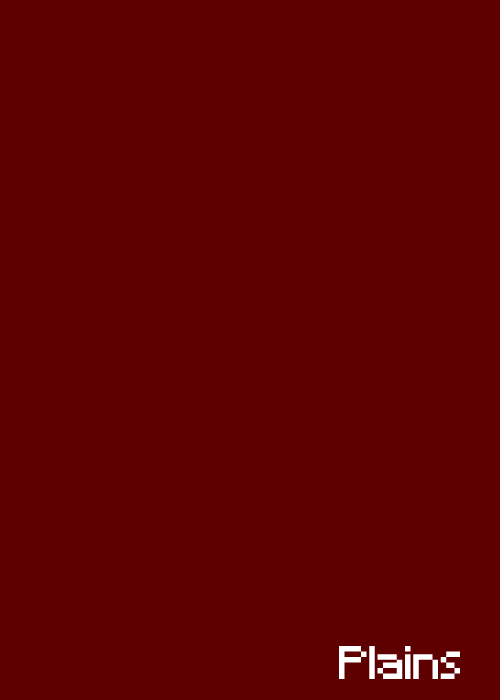
<style>
.page{position:relative;width:500px;height:700px;background:#5f0000}
.page>*{position:absolute;margin:0}
.t1{font:44px "Minecraft";color:#ffffff}
</style>
<div class="page">
<p class="t1" style="left:339px;top:646px;width:121px;height:33px">Plains</p>
</div>
